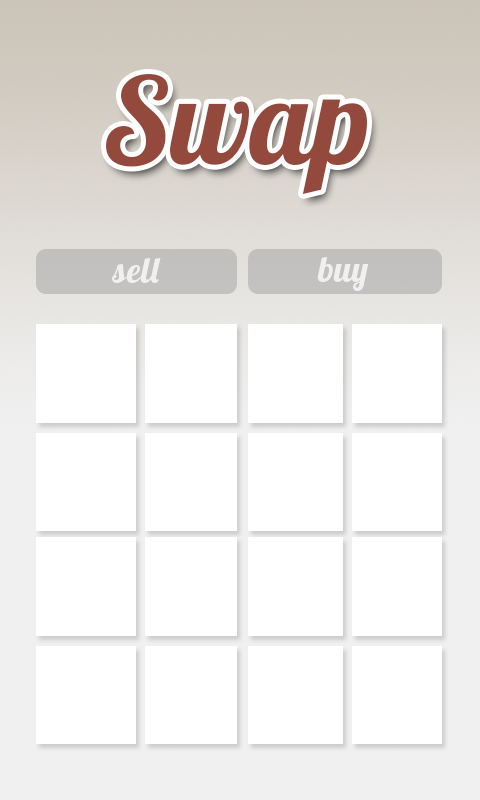
<style>
.page{position:relative;width:480px;height:800px;background:#ffffff}
.page>*{position:absolute;margin:0}
.t1{font:120px "Lobster1.4";color:#94493d}
.t2{font:36px "Lobster1.4";color:#f0f0f0}
</style>
<div class="page">
<p class="t1" style="left:106px;top:74px;width:261px;height:120px">Swap</p>
<p class="t2" style="left:317px;top:257px;width:52px;height:34px">buy</p>
<p class="t2" style="left:112px;top:258px;width:49px;height:25px">sell</p>
</div>
